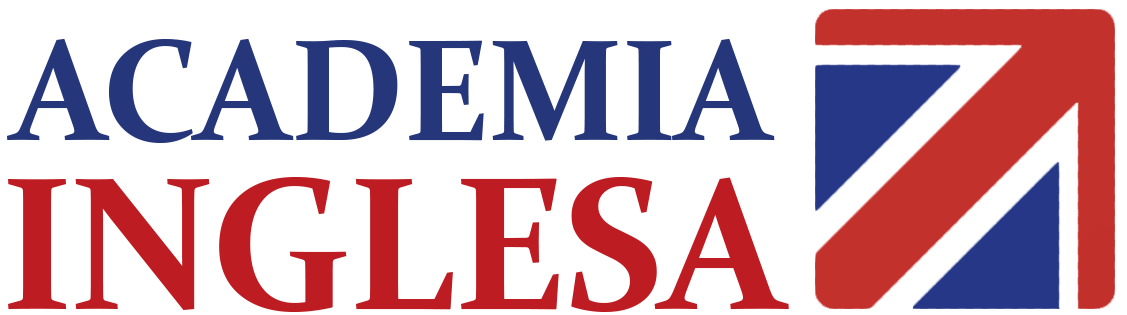
<style>
.page{position:relative;width:1127px;height:315px;background:#ffffff}
.page>*{position:absolute;margin:0}
.t1{font:145px "Constantia-Bold";letter-spacing:-0.015em;color:#25367b}
.t2{font:190px "Constantia-Bold";letter-spacing:-0.02em;color:#bd1d22}
</style>
<div class="page">
<p class="t1" style="left:6px;top:38px;width:769px;height:105px">ACADEMIA</p>
<p class="t2" style="left:8px;top:176px;width:781px;height:136px">INGLESA</p>
</div>
